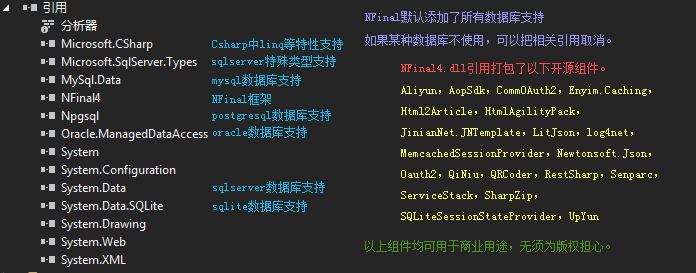
<style>
.page{position:relative;width:696px;height:273px;background:#252526}
.page>*{position:absolute;margin:0}
.t1{font:12px "SimSun";color:#9692ee}
.t2{font:12px "SimSun";color:#25b5e4}
.t3{font:12px "SimSun";color:#f44e4e}
.t4{font:12px "SimSun";color:#f6fb68}
.t5{font:12px "SimSun";color:#4e931b}
</style>
<div class="page">
<p class="t1" style="left:365px;top:11px;width:179px;height:12px">NFinal默认添加了所有数据库支持</p>
<p class="t2" style="left:212px;top:38px;width:131px;height:12px">Csharp中linq等特性支持</p>
<p class="t1" style="left:365px;top:34px;width:246px;height:12px">如果某种数据库不使用，可以把相关引用取消。</p>
<p class="t2" style="left:212px;top:55px;width:124px;height:12px">sqlserver特殊类型支持</p>
<p class="t3" style="left:401px;top:62px;width:204px;height:12px">NFinal4.dll引用打包了以下开源组件。</p>
<p class="t2" style="left:212px;top:74px;width:89px;height:12px">mysql数据库支持</p>
<p class="t4" style="left:401px;top:86px;width:256px;height:136px">Aliyun，AopSdk，CommOAuth2，Enyim.Caching，<br>Html2Article，HtmlAgilityPack，<br>JinianNet.JNTemplate，LitJson，log4net，<br>MemcachedSessionProvider，Newtonsoft.Json，<br>Oauth2，QiNiu，QRCoder，RestSharp，Senparc，<br>ServiceStack，SharpZip，<br>SQLiteSessionStateProvider，UpYun</p>
<p class="t2" style="left:212px;top:93px;width:59px;height:12px">NFinal框架</p>
<p class="t2" style="left:212px;top:109px;width:119px;height:12px">postgresql数据库支持</p>
<p class="t2" style="left:213px;top:126px;width:94px;height:12px">oracle数据库支持</p>
<p class="t2" style="left:213px;top:181px;width:112px;height:12px">sqlserver数据库支持</p>
<p class="t2" style="left:213px;top:200px;width:94px;height:12px">sqlite数据库支持</p>
<p class="t5" style="left:365px;top:240px;width:245px;height:12px">以上组件均可用于商业用途，无须为版权担心。</p>
</div>
